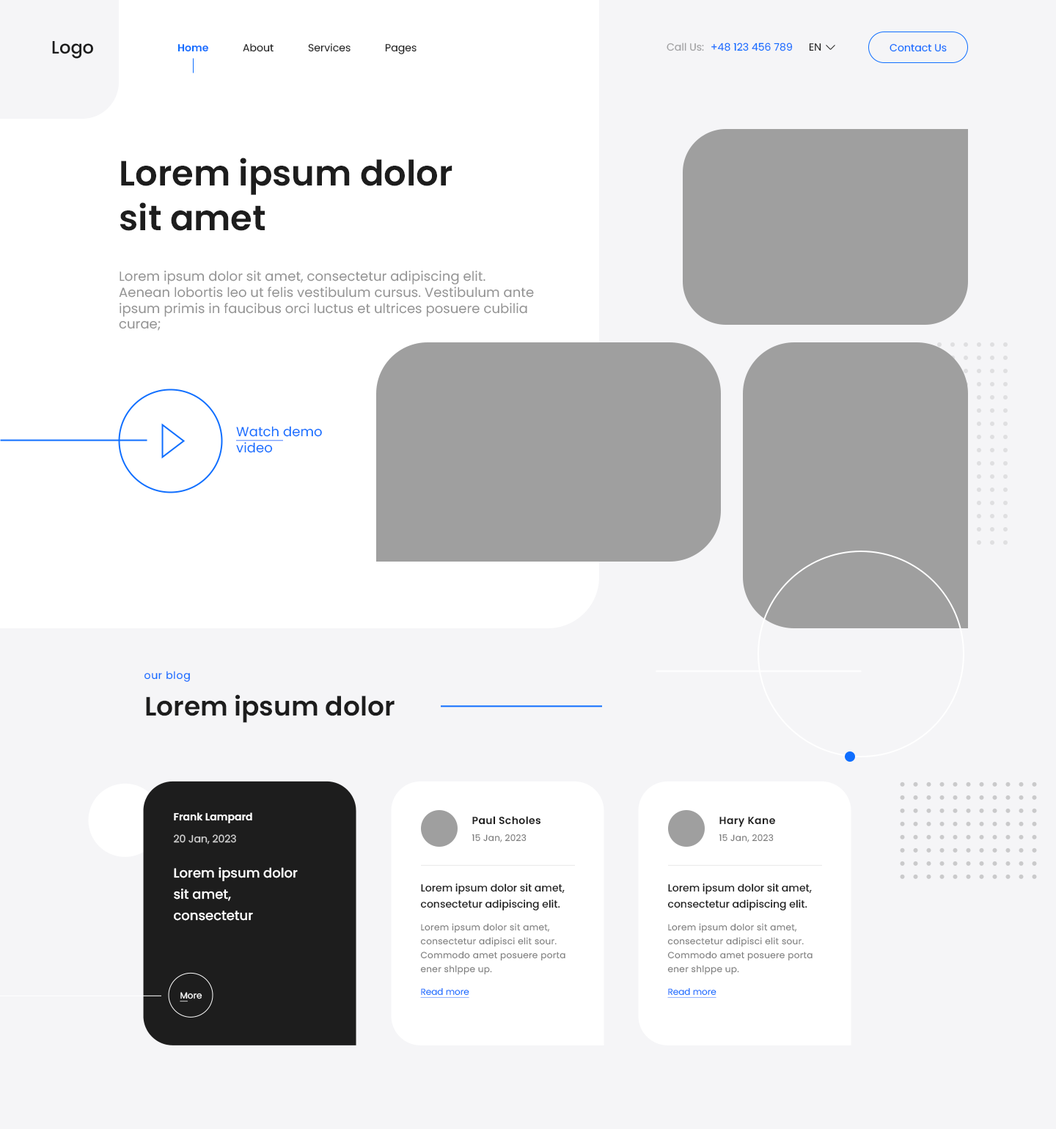
<style>
.page{position:relative;width:1056px;height:1129px;background:#f5f5f7}
.page>*{position:absolute;margin:0}
.t1{font:10.3px "Poppins-SemiBold";letter-spacing:0.004em;color:#0f6eff}
.t2{font:10.3px "Poppins-Regular";letter-spacing:0.004em;color:#1d1d1d}
.t3{font:10.3px "Poppins-Regular";letter-spacing:0.004em;color:#a1a1a3}
.t4{font:10.3px "Poppins-Regular";letter-spacing:0.004em;color:#0f6eff}
.t5{font:35.2px/44.7px "Poppins-SemiBold";color:#1d1d1d}
.t6{font:13.2px "Poppins-Regular";letter-spacing:0.004em;color:#939393}
.t7{font:13.2px "Poppins-Regular";letter-spacing:0.004em;color:#0f6eff}
.t8{font:13.2px "Poppins-Regular";letter-spacing:0.004em;color:#0f6eff;text-decoration:underline}
.t9{font:10.3px "Poppins-Regular";letter-spacing:0.05em;color:#0f6eff}
.t10{font:26.4px "Poppins-SemiBold";color:#1d1d1d}
.t11{font:10.3px "Poppins-SemiBold";color:#ffffff}
.t12{font:10.3px "Poppins-SemiBold";letter-spacing:0.028em;color:#1d1d1d}
.t13{font:10.3px "Poppins-Regular";color:#cdcdcd}
.t14{font:8.8px "Poppins-Regular";letter-spacing:0.028em;color:#7d7d7d}
.t15{font:13.2px/21.3px "Poppins-Medium";color:#ffffff}
.t16{font:10.3px/16.1px "Poppins-Medium";color:#1d1d1d}
.t17{font:8.8px/13.9px "Poppins-Regular";letter-spacing:0.03em;color:#7d7d7d}
.t18{font:8.8px "Poppins-Regular";color:#0f6eff;text-decoration:underline}
.t19{font:8.8px "Poppins-Regular";color:#ffffff}
.t20{font:8.8px "Poppins-Regular";color:#ffffff;text-decoration:underline}
</style>
<div class="page">
<p class="t1" style="left:177px;top:44px;width:31px;height:8px">Home</p>
<p class="t2" style="left:243px;top:43px;width:31px;height:9px">About</p>
<p class="t2" style="left:308px;top:43px;width:43px;height:9px">Services</p>
<p class="t2" style="left:385px;top:44px;width:32px;height:10px">Pages</p>
<p class="t3" style="left:667px;top:43px;width:37px;height:8px">Call Us:</p>
<p class="t4" style="left:711px;top:43px;width:82px;height:8px">+48 123 456 789</p>
<p class="t2" style="left:809px;top:43px;width:12px;height:8px">EN</p>
<p class="t4" style="left:889px;top:43px;width:58px;height:9px">Contact Us</p>
<p class="t5" style="left:120px;top:158px;width:332px;height:73px">Lorem ipsum dolor<br>sit amet</p>
<p class="t6" style="left:119px;top:271px;width:415px;height:60px">Lorem ipsum dolor sit amet, consectetur adipiscing elit. Aenean lobortis leo ut felis vestibulum cursus. Vestibulum ante ipsum primis in faucibus orci luctus et ultrices posuere cubilia curae;</p>
<p class="t7" style="left:236px;top:426px;width:86px;height:27px"><span class="t8">Watch </span>demo<br>video</p>
<p class="t9" style="left:144px;top:671px;width:46px;height:11px">our blog</p>
<p class="t10" style="left:146px;top:694px;width:249px;height:29px">Lorem ipsum dolor</p>
<p class="t11" style="left:174px;top:812px;width:78px;height:11px">Frank Lampard</p>
<p class="t12" style="left:472px;top:816px;width:69px;height:9px">Paul Scholes</p>
<p class="t12" style="left:719px;top:817px;width:56px;height:10px">Hary Kane</p>
<p class="t13" style="left:174px;top:834px;width:62px;height:11px">20 Jan, 2023</p>
<p class="t14" style="left:472px;top:834px;width:55px;height:9px">15 Jan, 2023</p>
<p class="t14" style="left:719px;top:834px;width:55px;height:9px">15 Jan, 2023</p>
<p class="t15" style="left:174px;top:867px;width:124px;height:54px">Lorem ipsum dolor sit amet, consectetur adipiscing elit.</p>
<p class="t16" style="left:420px;top:884px;width:145px;height:27px">Lorem ipsum dolor sit amet, consectetur adipiscing elit.</p>
<p class="t16" style="left:667px;top:884px;width:145px;height:27px">Lorem ipsum dolor sit amet, consectetur adipiscing elit.</p>
<p class="t17" style="left:420px;top:923px;width:145px;height:52px">Lorem ipsum dolor sit amet, consectetur adipisci elit sour. Commodo amet posuere porta ener shlppe up.</p>
<p class="t17" style="left:667px;top:923px;width:145px;height:52px">Lorem ipsum dolor sit amet, consectetur adipisci elit sour. Commodo amet posuere porta ener shlppe up.</p>
<p class="t18" style="left:420px;top:988px;width:49px;height:11px">Read more</p>
<p class="t18" style="left:667px;top:988px;width:49px;height:11px">Read more</p>
<p class="t19" style="left:180px;top:992px;width:22px;height:10px"><span class="t20">M</span>ore</p>
</div>
